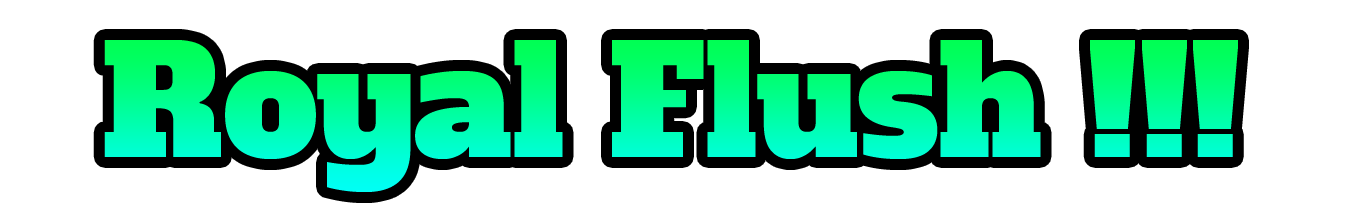
<style>
.page{position:relative;width:1352px;height:210px;background:#ffffff}
.page>*{position:absolute;margin:0}
.t1{font:150px "AlfaSlabOne-Regular";color:#ffffff}
</style>
<div class="page">
<p class="t1" style="left:104px;top:40px;width:1134px;height:152px">Royal Flush !!!</p>
</div>
